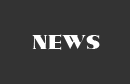
<style>
.page{position:relative;width:130px;height:84px;background:#333333}
.page>*{position:absolute;margin:0}
.t1{font:20px "Vogue";color:#ffffff}
</style>
<div class="page">
<p class="t1" style="left:32px;top:34px;width:68px;height:16px">NEWS</p>
</div>
